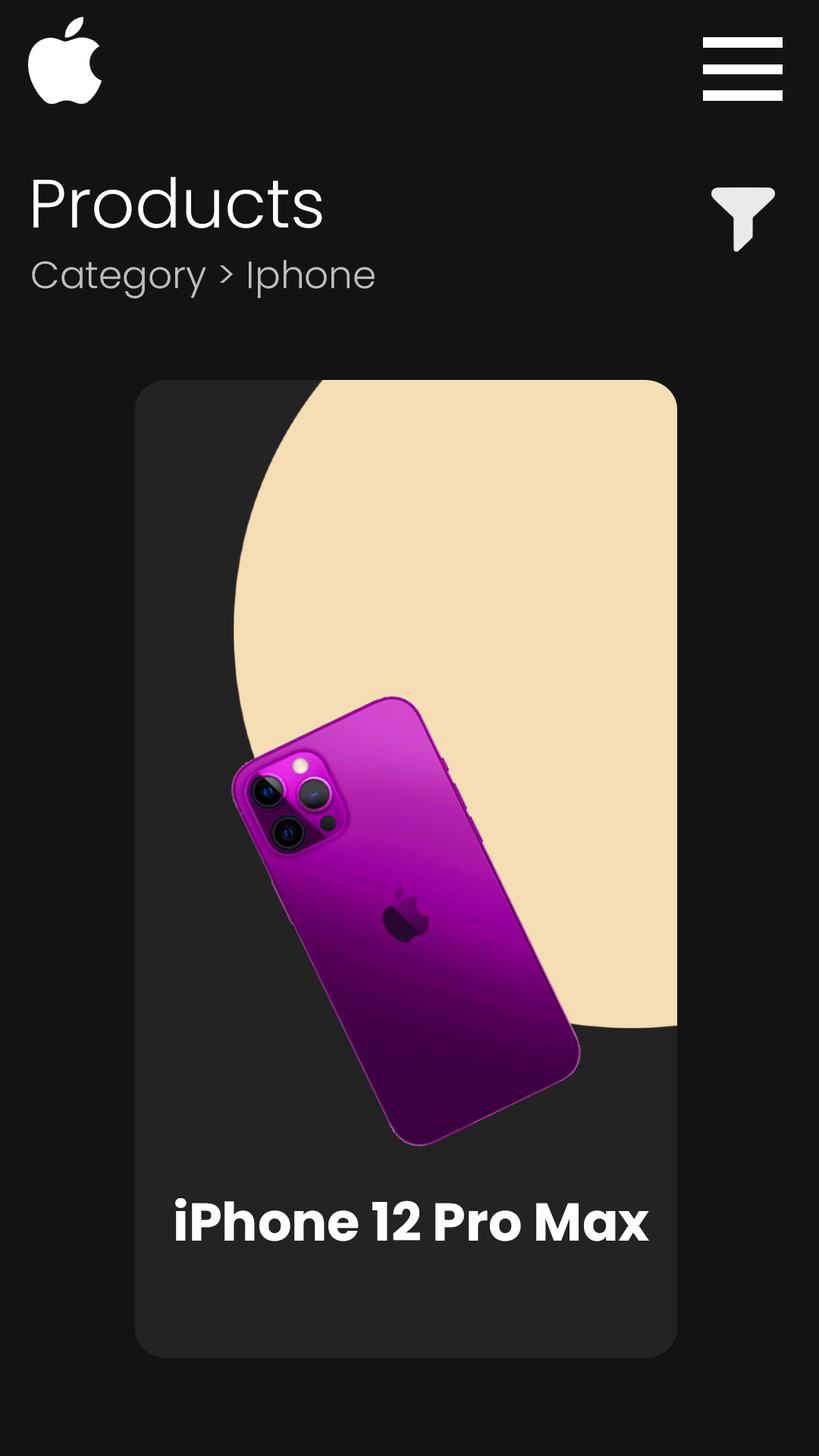
<style>
.page{position:relative;width:819px;height:1456px;background:#131313}
.page>*{position:absolute;margin:0}
.t1{font:68.2px "Poppins-Light";color:#ffffff}
.t2{font:37.9px "Poppins-Light";color:#bebebe}
.t3{font:53.1px "Poppins-Bold";color:#ffffff}
</style>
<div class="page">
<p class="t1" style="left:33px;top:177px;width:289px;height:51px">Products</p>
<p class="t2" style="left:32px;top:260px;width:343px;height:39px">Category &gt; Iphone</p>
<p class="t3" style="left:175px;top:1198px;width:474px;height:43px">iPhone 12 Pro Max</p>
</div>
